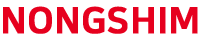
<style>
.page{position:relative;width:200px;height:40px;background:#ffffff}
.page>*{position:absolute;margin:0}
.t1{font:36px "NanumSquareOTFEB";color:#e6001e;text-transform:uppercase;font-weight:bold}
</style>
<div class="page">
<p class="t1" style="left:3px;top:6px;width:195px;height:28px">nongshim</p>
</div>
